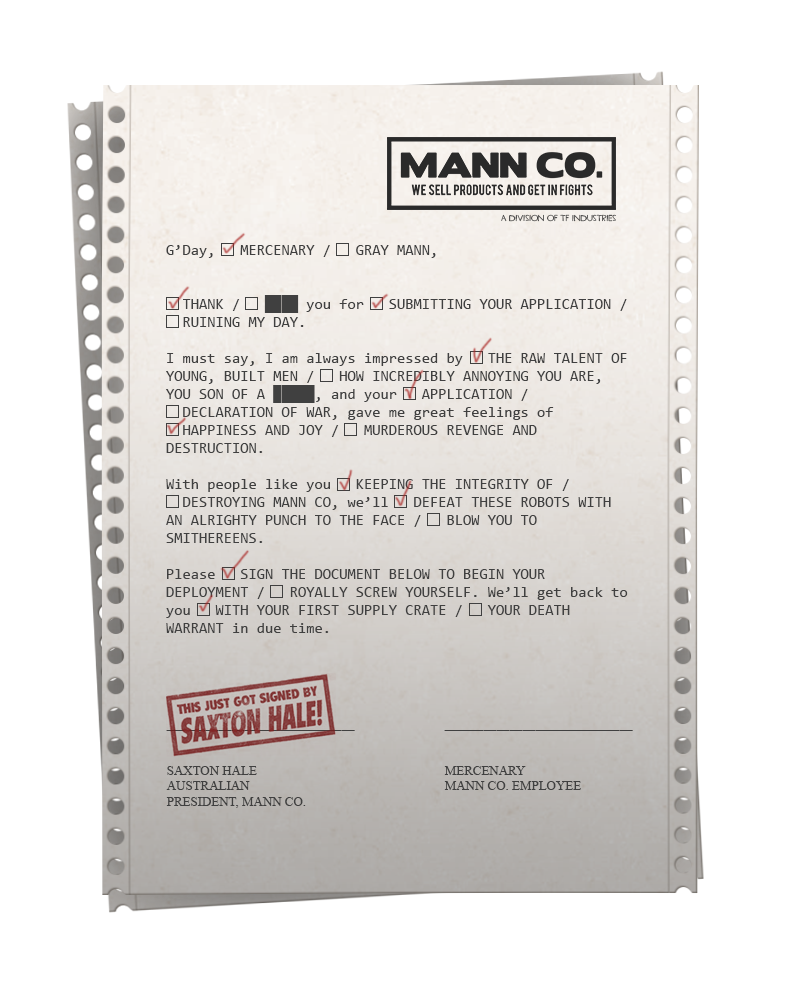
<style>
.page{position:relative;width:800px;height:1000px;background:#ffffff}
.page>*{position:absolute;margin:0}
.t1{font:8.4px "TF2Secondary";color:#404040}
.t2{font:15px "Consolas";color:#404040}
.t3{font:12.9px "TimesNewRomanPSMT";color:#404040}
</style>
<div class="page">
<p class="t1" style="left:501px;top:214px;width:115px;height:8px">A DIVISION OF TF INDUSTRIES</p>
<p class="t2" style="left:166px;top:245px;width:462px;height:388px">G’Day,   MERCENARY /   GRAY MANN,<br><br><br>  THANK /   ████ you for   SUBMITTING YOUR APPLICATION / <br>  RUINING MY DAY. <br><br>I must say, I am always impressed by   THE RAW TALENT OF YOUNG, BUILT MEN /   HOW INCREDIBLY ANNOYING YOU ARE, YOU SON OF A █████, and your   APPLICATION /<br>  DECLARATION OF WAR, gave me great feelings of<br>  HAPPINESS AND JOY /   MURDEROUS REVENGE AND DESTRUCTION.<br><br>With people like you   KEEPING THE INTEGRITY OF /<br>  DESTROYING MANN CO, we’ll   DEFEAT THESE ROBOTS WITH AN ALRIGHTY PUNCH TO THE FACE /   BLOW YOU TO SMITHEREENS.<br><br>Please   SIGN THE DOCUMENT BELOW TO BEGIN YOUR DEPLOYMENT /   ROYALLY SCREW YOURSELF. We’ll get back to you   WITH YOUR FIRST SUPPLY CRATE /   YOUR DEATH WARRANT in due time.</p>
<p class="t3" style="left:166px;top:730px;width:189px;height:78px">_____________________________<br><br><br>SAXTON HALE<br>AUSTRALIAN<br>PRESIDENT, MANN CO.</p>
<p class="t3" style="left:444px;top:730px;width:189px;height:60px">_____________________________<br><br><br>MERCENARY<br>MANN CO. EMPLOYEE</p>
</div>
